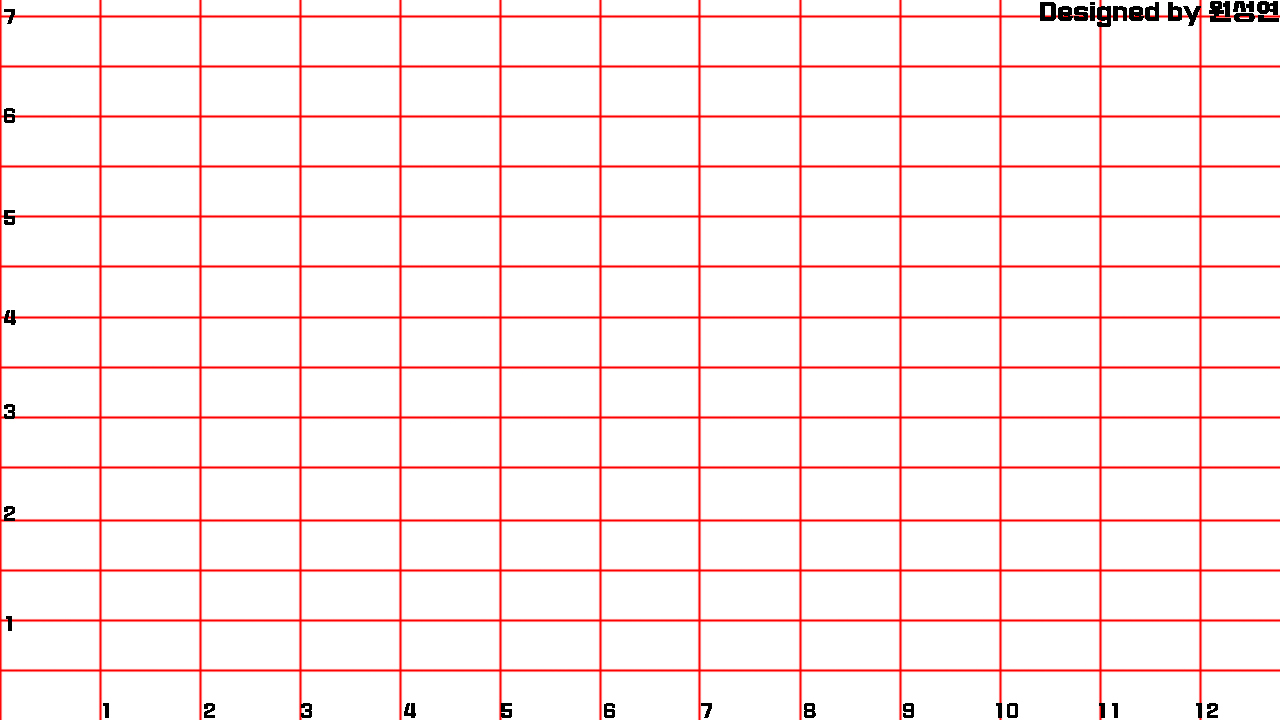
<style>
.page{position:relative;width:1280px;height:720px;background:#ffffff}
.page>*{position:absolute;margin:0}
.t1{font:24px "Typo_SsangmunDong_B";color:#000000}
.t2{font:18px "Typo_SsangmunDong_B";color:#000000}
</style>
<div class="page">
<p class="t1" style="left:1040px;top:1px;width:239px;height:26px">Designed by 원성연</p>
<p class="t2" style="left:4px;top:9px;width:11px;height:15px">7</p>
<p class="t2" style="left:4px;top:108px;width:11px;height:15px">6</p>
<p class="t2" style="left:4px;top:210px;width:11px;height:15px">5</p>
<p class="t2" style="left:4px;top:310px;width:12px;height:15px">4</p>
<p class="t2" style="left:4px;top:404px;width:11px;height:15px">3</p>
<p class="t2" style="left:4px;top:506px;width:11px;height:15px">2</p>
<p class="t2" style="left:6px;top:616px;width:6px;height:15px">1</p>
<p class="t2" style="left:103px;top:703px;width:6px;height:15px">1</p>
<p class="t2" style="left:204px;top:703px;width:11px;height:15px">2</p>
<p class="t2" style="left:301px;top:703px;width:11px;height:15px">3</p>
<p class="t2" style="left:404px;top:703px;width:12px;height:15px">4</p>
<p class="t2" style="left:501px;top:703px;width:11px;height:15px">5</p>
<p class="t2" style="left:604px;top:703px;width:11px;height:15px">6</p>
<p class="t2" style="left:701px;top:703px;width:11px;height:15px">7</p>
<p class="t2" style="left:804px;top:703px;width:12px;height:15px">8</p>
<p class="t2" style="left:903px;top:703px;width:11px;height:15px">9</p>
<p class="t2" style="left:996px;top:703px;width:22px;height:15px">10</p>
<p class="t2" style="left:1099px;top:703px;width:19px;height:15px">11</p>
<p class="t2" style="left:1196px;top:703px;width:22px;height:15px">12</p>
</div>
